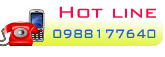
<style>
.page{position:relative;width:165px;height:57px;background:#ffffff}
.page>*{position:absolute;margin:0}
.t1{font:20.8px "BankGothicBT-Light";color:#f60a47;scale:1.07 1}
.t2{font:16px "BankGothicBT-Light";color:#2062d0;scale:0.87 1}
</style>
<div class="page">
<p class="t1" style="left:59px;top:6px;width:97px;height:12px">Hot line</p>
<p class="t2" style="left:53px;top:29px;width:103px;height:10px">0988177640</p>
</div>
